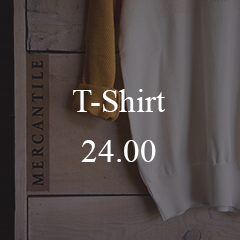
<style>
.page{position:relative;width:240px;height:240px}
.page>*{position:absolute;margin:0}
.t1{font:33.3px/50px "TimesNewRomanPSMT";color:#ffffff}
</style>
<div class="page">
<p class="t1" style="left:73px;top:89px;width:92px;height:73px;text-align:center">T-Shirt<br>24.00</p>
</div>
